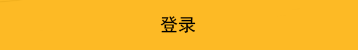
<style>
.page{position:relative;width:358px;height:50px;background:#fdba25}
.page>*{position:absolute;margin:0}
.t1{font:18px "SimHei";color:#000000}
</style>
<div class="page">
<p class="t1" style="left:160px;top:16px;width:36px;height:17px">登录</p>
</div>
